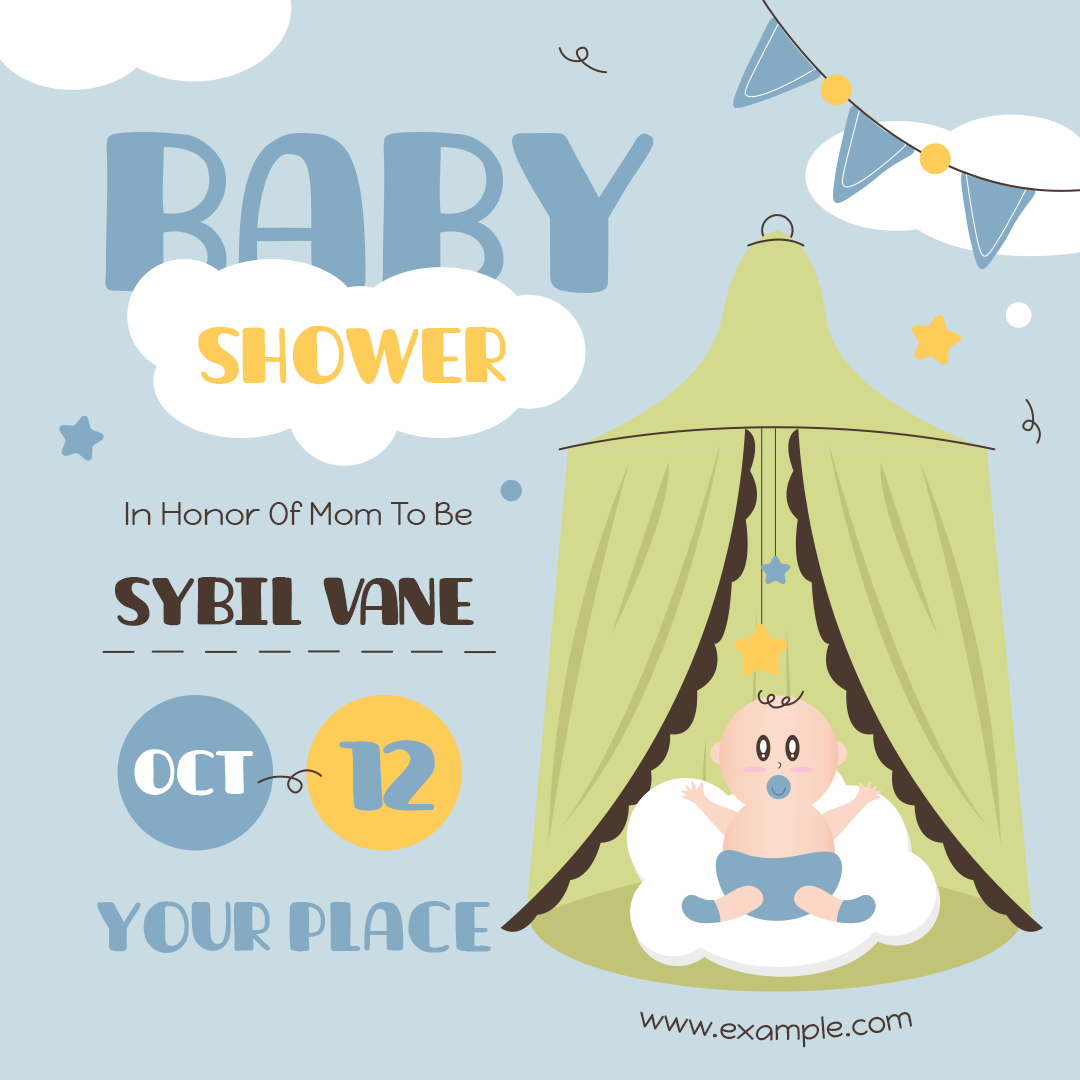
<style>
.page{position:relative;width:1080px;height:1080px;background:#c9dbe3}
.page>*{position:absolute;margin:0}
.t1{font:228.2px "Launica";color:#85abc4}
.t2{font:79px "Launica";color:#fecc58}
.t3{font:31.9px "HappyMonkey-Regular";color:#4b3930}
.t4{font:67.5px "Launica";color:#4b3930}
.t5{font:61.6px "Launica";color:#ffffff}
.t6{font:101px "Launica";color:#85abc4}
.t7{font:70.1px "Launica";color:#85abc4}
.t8{font:30px "HappyMonkey-Regular";color:#4b3930}
</style>
<div class="page">
<p class="t1" style="left:105px;top:132px;width:549px;height:161px">BABY</p>
<p class="t2" style="left:198px;top:325px;width:308px;height:60px">SHOWER</p>
<p class="t3" style="left:125px;top:501px;width:347px;height:24px">In Honor Of Mom To Be</p>
<p class="t4" style="left:115px;top:577px;width:359px;height:49px">SYBIL VANE</p>
<p class="t5" style="left:134px;top:749px;width:119px;height:47px">OCT</p>
<p class="t6" style="left:339px;top:740px;width:96px;height:71px">12</p>
<p class="t7" style="left:97px;top:901px;width:394px;height:52px">YOUR PLACE</p>
<p class="t8" style="left:640px;top:1011px;width:273px;height:37px">www.example.com</p>
</div>
